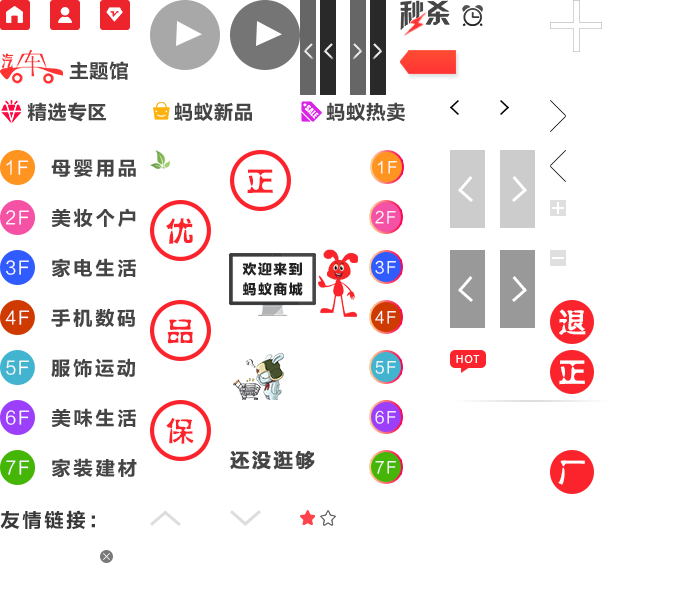
<style>
.page{position:relative;width:700px;height:600px;background:#ffffff}
.page>*{position:absolute;margin:0}
.t1{font:16px "FZMHJW--GB1-0";letter-spacing:0.06em;color:#ff3333}
.t2{font:20px "FZLTCHJW--GB1-0";color:#454545}
.t3{font:20px "FZLTCHK--GBK1-0";color:#454545}
.t4{font:18px "FZLTXHK";letter-spacing:0.1em;color:#ffffff}
.t5{font:20px "FZLTCHJW--GB1-0";letter-spacing:0.1em;color:#454545}
.t6{font:16px "FZLTXHK";letter-spacing:0.1em;color:#ffffff}
.t7{font:28px "FZSHHJW--GB1-0";letter-spacing:0.06em;color:#fc242c}
.t8{font:14px/20px "FZLTTHK--GBK1-0";letter-spacing:0.1em;color:#212121}
.t9{font:28px "FZSHHJW--GB1-0";letter-spacing:0.06em;color:#ffffff}
.t10{font:10px "MicrosoftYaHei";letter-spacing:0.1em;color:#ffffff}
.t11{font:20px "FZLTCHJW--GB1-0";letter-spacing:0.06em;color:#454545;font-weight:bold}
.t12{font:20px "FZLTCHJW--GB1-0";letter-spacing:0.1em;color:#383838}
</style>
<div class="page">
<p class="t1" style="left:2px;top:53px;width:12px;height:16px">汽</p>
<p class="t2" style="left:69px;top:61px;width:59px;height:19px">主题馆</p>
<p class="t3" style="left:27px;top:102px;width:378px;height:20px">精选专区            蚂蚁新品             蚂蚁热卖</p>
<p class="t4" style="left:6px;top:160px;width:23px;height:15px">1F</p>
<p class="t5" style="left:51px;top:159px;width:85px;height:18px">母婴用品</p>
<p class="t6" style="left:377px;top:160px;width:20px;height:14px">1F</p>
<p class="t7" style="left:247px;top:169px;width:26px;height:25px">正</p>
<p class="t5" style="left:51px;top:208px;width:85px;height:19px">美妆个户</p>
<p class="t4" style="left:6px;top:210px;width:23px;height:15px">2F</p>
<p class="t7" style="left:166px;top:218px;width:27px;height:26px">优</p>
<p class="t6" style="left:375px;top:210px;width:21px;height:14px">2F</p>
<p class="t4" style="left:6px;top:260px;width:23px;height:15px">3F</p>
<p class="t5" style="left:52px;top:258px;width:84px;height:19px">家电生活</p>
<p class="t8" style="left:242px;top:262px;width:61px;height:34px">欢迎来到<br>蚂蚁商城</p>
<p class="t6" style="left:375px;top:260px;width:21px;height:14px">3F</p>
<p class="t4" style="left:5px;top:310px;width:25px;height:15px">4F</p>
<p class="t5" style="left:51px;top:308px;width:84px;height:19px">手机数码</p>
<p class="t6" style="left:375px;top:310px;width:21px;height:14px">4F</p>
<p class="t9" style="left:559px;top:309px;width:27px;height:26px">退</p>
<p class="t7" style="left:167px;top:319px;width:26px;height:25px">品</p>
<p class="t4" style="left:6px;top:360px;width:23px;height:15px">5F</p>
<p class="t5" style="left:51px;top:358px;width:84px;height:20px">服饰运动</p>
<p class="t6" style="left:375px;top:361px;width:21px;height:13px">5F</p>
<p class="t10" style="left:456px;top:355px;width:24px;height:8px">HOT</p>
<p class="t9" style="left:559px;top:360px;width:26px;height:25px">正</p>
<p class="t4" style="left:6px;top:410px;width:24px;height:15px">6F</p>
<p class="t5" style="left:51px;top:408px;width:85px;height:19px">美味生活</p>
<p class="t6" style="left:375px;top:410px;width:21px;height:14px">6F</p>
<p class="t7" style="left:166px;top:418px;width:28px;height:26px">保</p>
<p class="t4" style="left:6px;top:460px;width:24px;height:15px">7F</p>
<p class="t5" style="left:52px;top:458px;width:85px;height:19px">家装建材</p>
<p class="t11" style="left:230px;top:450px;width:85px;height:20px">还没逛够</p>
<p class="t6" style="left:375px;top:461px;width:21px;height:13px">7F</p>
<p class="t9" style="left:558px;top:460px;width:27px;height:25px">厂</p>
<p class="t12" style="left:0px;top:510px;width:95px;height:19px">友情链接：</p>
</div>
